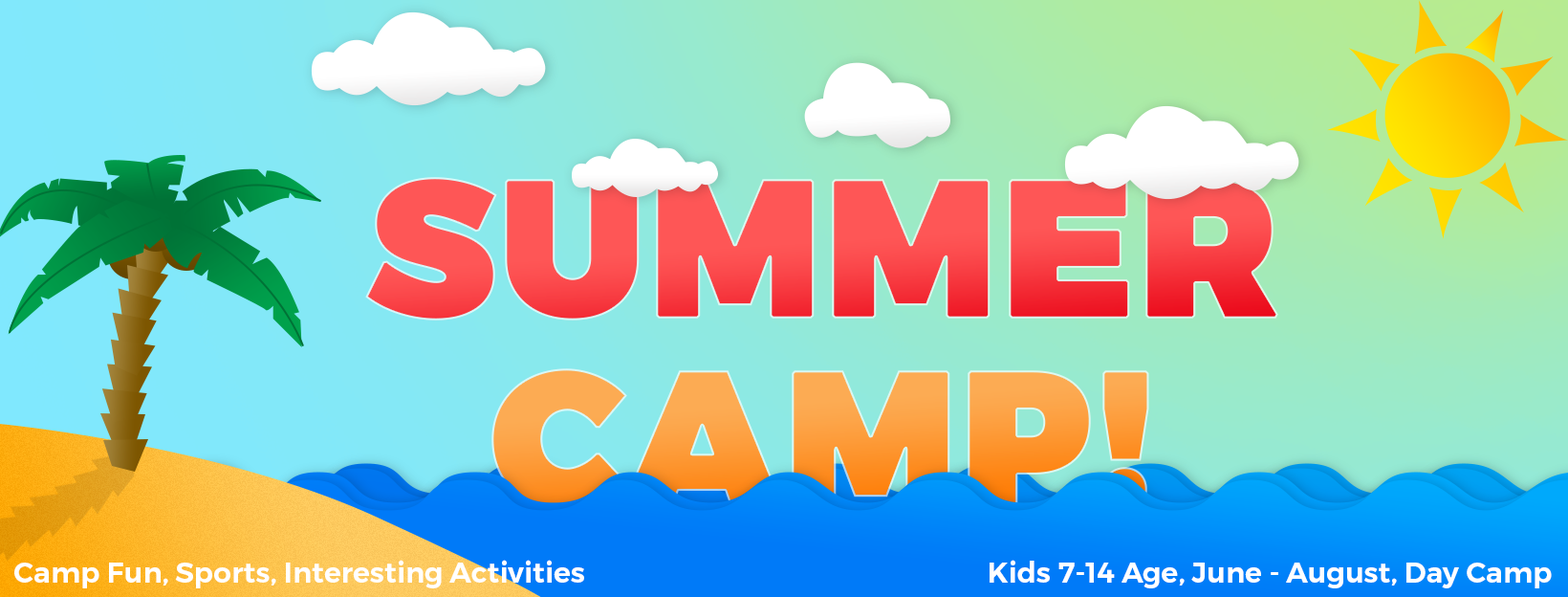
<style>
.page{position:relative;width:1568px;height:597px}
.page>*{position:absolute;margin:0}
.t1{font:191.2px "Montserrat-Black";text-transform:uppercase;font-weight:bold}
.t2{font:28.7px "Montserrat-SemiBold";color:#ffffff}
</style>
<div class="page">
<p class="t1" style="left:365px;top:177px;width:913px;height:143px">Summer</p>
<p class="t1" style="left:491px;top:368px;width:658px;height:144px">Camp!</p>
<p class="t2" style="left:14px;top:559px;width:570px;height:29px">Camp Fun, Sports, Interesting Activities</p>
<p class="t2" style="left:990px;top:559px;width:562px;height:29px">Kids 7-14 Age, June - August, Day Camp</p>
</div>
